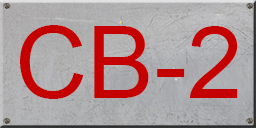
<style>
.page{position:relative;width:256px;height:128px}
.page>*{position:absolute;margin:0}
.t1{font:99.5px "ArialMT";color:#c40000}
</style>
<div class="page">
<p class="t1" style="left:20px;top:25px;width:218px;height:74px">СВ-2</p>
</div>
